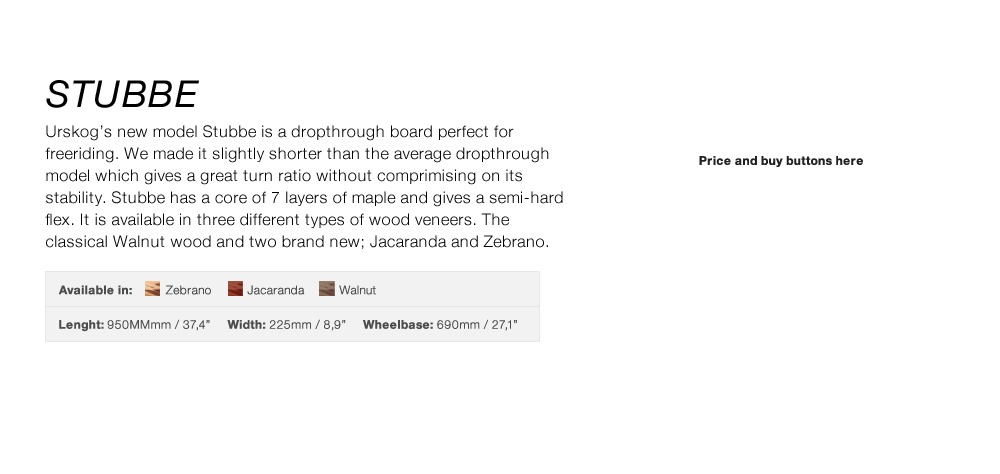
<style>
.page{position:relative;width:1000px;height:474px;background:#ffffff}
.page>*{position:absolute;margin:0}
.t1{font:16px/22px "HelveticaNeue-Light";letter-spacing:0.04em;color:#000000}
.t2{font:37px/30px "HelveticaNeue-Italic";letter-spacing:0.04em;color:#000000}
.t3{font:16px/30px "HelveticaNeue-Light";letter-spacing:0.04em;color:#000000}
.t4{font:12px "HelveticaNeue-Bold";letter-spacing:0.04em;color:#222222}
.t5{font:12px "HelveticaNeue-Bold";letter-spacing:0.04em;color:#4c4c4c}
.t6{font:12px "HelveticaNeue-Light";letter-spacing:0.04em;color:#4c4c4c}
</style>
<div class="page">
<p class="t1" style="left:45px;top:80px;width:518px;height:170px"><span class="t2">STUBBE<br></span><span class="t3">U</span>rskog’s new model Stubbe is a dropthrough board perfect for freeriding. We made it slightly shorter than the average dropthrough model which gives a great turn ratio without comprimising on its stability. Stubbe has a core of 7 layers of maple and gives a semi-hard flex. It is available in three different types of wood veneers. The classical Walnut wood and two brand new; Jacaranda and Zebrano.</p>
<p class="t4" style="left:699px;top:156px;width:164px;height:11px">Price and buy buttons here</p>
<p class="t5" style="left:58px;top:285px;width:74px;height:10px">Available in:</p>
<p class="t6" style="left:165px;top:285px;width:211px;height:10px">Zebrano          Jacaranda          Walnut</p>
<p class="t6" style="left:59px;top:319px;width:458px;height:13px"><span class="t5">Lenght: </span>950MMmm / 37,4”     <span class="t5">Width:</span> 225mm / 8,9”     <span class="t5">Wheelbase:</span> 690mm / 27,1”</p>
</div>
